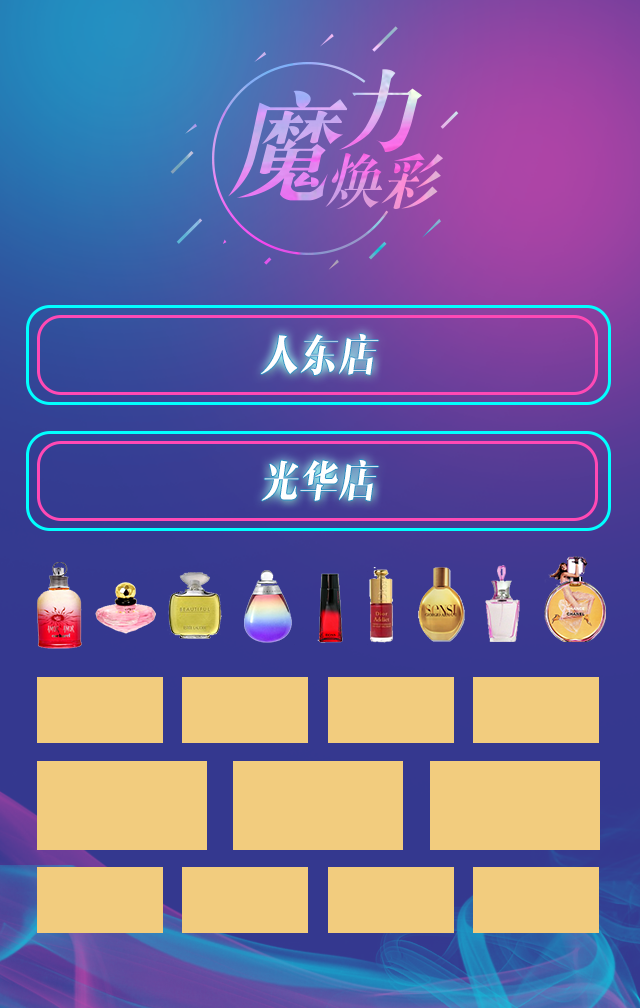
<style>
.page{position:relative;width:640px;height:1008px}
.page>*{position:absolute;margin:0}
.t1{font:43.7px "MFShangYa_Noncommercial-Regular";color:#ffffff;scale:0.89 1}
</style>
<div class="page">
<p class="t1" style="left:261px;top:334px;width:118px;height:41px">人东店</p>
<p class="t1" style="left:261px;top:460px;width:118px;height:41px">光华店</p>
</div>
